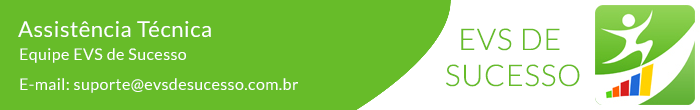
<style>
.page{position:relative;width:700px;height:110px;background:#67bc29}
.page>*{position:absolute;margin:0}
.t1{font:22px "Lato-Regular";letter-spacing:0.025em;color:#ffffff}
.t2{font:30px "Lato-Light";letter-spacing:0.025em;color:#67bc29;text-transform:uppercase}
.t3{font:16px "Lato-Regular";letter-spacing:0.025em;color:#ffffff}
</style>
<div class="page">
<p class="t1" style="left:18px;top:21px;width:193px;height:17px">Assistência Técnica</p>
<p class="t2" style="left:446px;top:28px;width:134px;height:59px;text-align:center">evs de <br>sucesso</p>
<p class="t3" style="left:20px;top:48px;width:166px;height:15px">Equipe EVS de Sucesso</p>
<p class="t3" style="left:20px;top:78px;width:278px;height:15px">E-mail: suporte@evsdesucesso.com.br</p>
</div>
